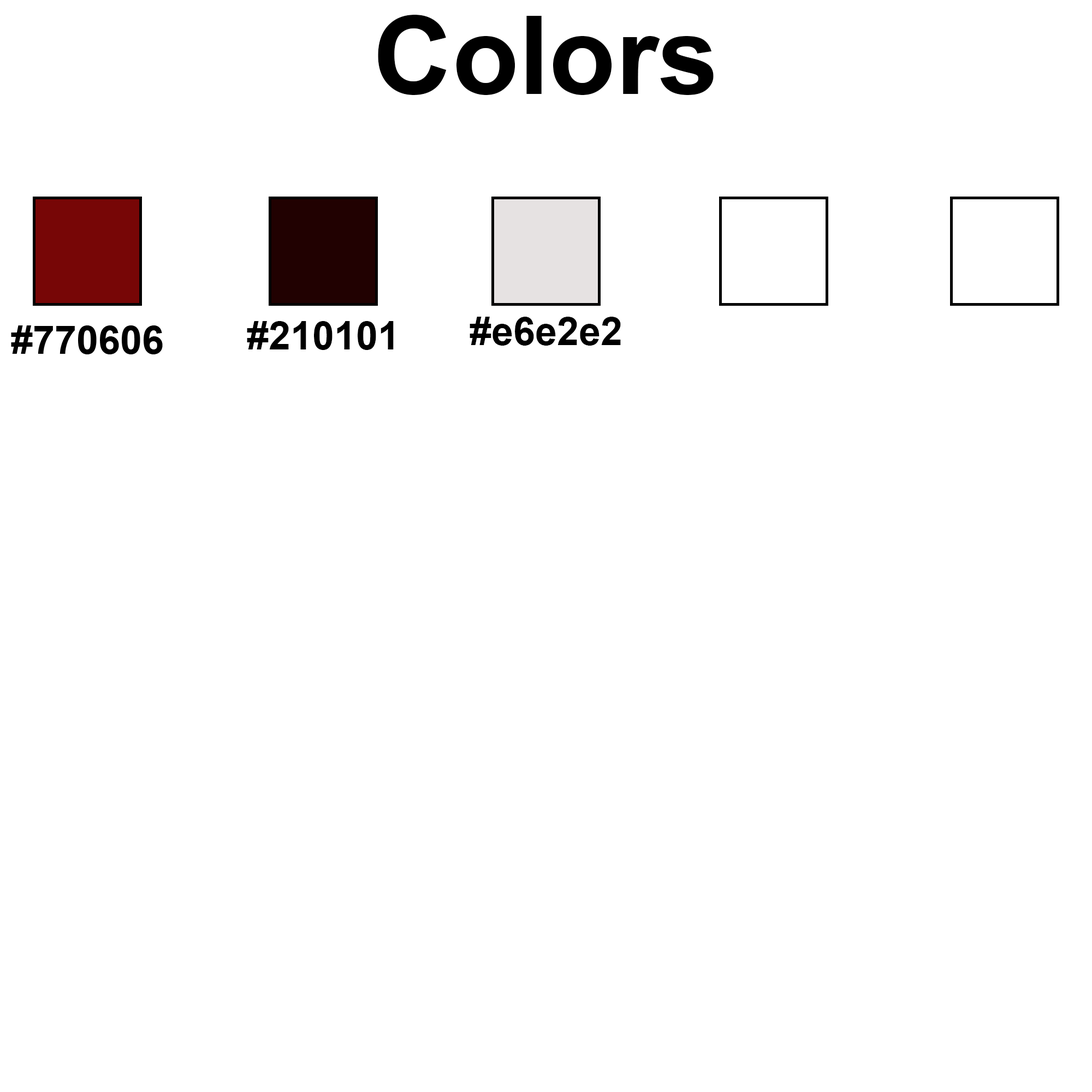
<style>
.page{position:relative;width:1092px;height:1092px;background:#ffffff}
.page>*{position:absolute;margin:0}
.t1{font:109.2px "Arial-BoldMT";color:#000000}
.t2{font:39.3px "Arial-BoldMT";color:#000000}
</style>
<div class="page">
<p class="t1" style="left:378px;top:15px;width:336px;height:80px">Colors</p>
<p class="t2" style="left:470px;top:317px;width:151px;height:29px">#e6e2e2</p>
<p class="t2" style="left:247px;top:321px;width:147px;height:29px">#210101</p>
</div>
